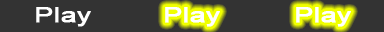
<style>
.page{position:relative;width:384px;height:32px;background:#333333}
.page>*{position:absolute;margin:0}
.t1{font:20.6px "ArialMT";color:#ffffff;font-weight:bold;scale:1.36 1}
</style>
<div class="page">
<p class="t1" style="left:36px;top:7px;width:55px;height:20px">Play</p>
<p class="t1" style="left:165px;top:7px;width:55px;height:20px">Play</p>
<p class="t1" style="left:296px;top:7px;width:55px;height:20px">Play</p>
</div>
